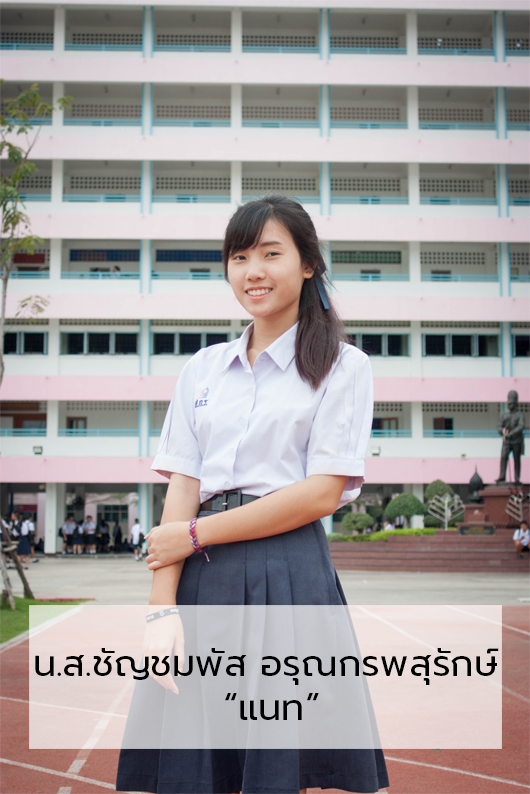
<style>
.page{position:relative;width:530px;height:794px}
.page>*{position:absolute;margin:0}
.t1{font:36.7px "Prompt-Regular";color:#000000}
</style>
<div class="page">
<p class="t1" style="left:35px;top:648px;width:464px;height:72px">น.ส.ชัญชมพัส อรุณกรพสุรักษ์<br>              “แนท”</p>
</div>
